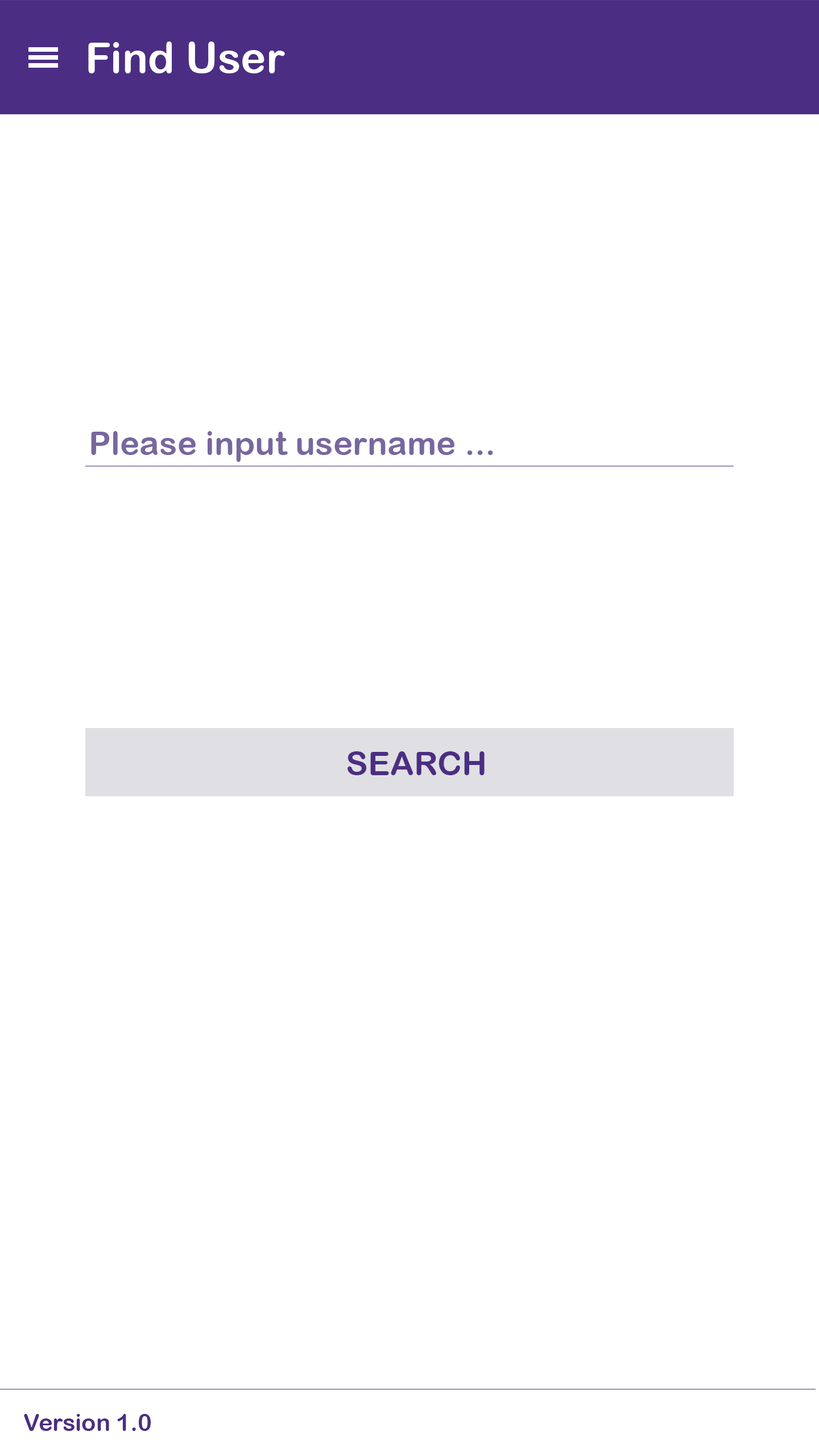
<style>
.page{position:relative;width:819px;height:1456px;background:#ffffff}
.page>*{position:absolute;margin:0}
.t1{font:42.7px "ArialRoundedMTBold";color:#ffffff}
.t2{font:33.2px "ArialRoundedMTBold";color:#78679f}
.t3{font:33.2px "ArialRoundedMTBold";color:#4b2e83}
.t4{font:23.7px "ArialRoundedMTBold";color:#4b2e83}
</style>
<div class="page">
<p class="t1" style="left:88px;top:42px;width:197px;height:31px">Find User</p>
<p class="t2" style="left:91px;top:431px;width:402px;height:31px">Please input username ...</p>
<p class="t3" style="left:348px;top:751px;width:137px;height:24px">SEARCH</p>
<p class="t4" style="left:24px;top:1414px;width:127px;height:17px">Version 1.0</p>
</div>
